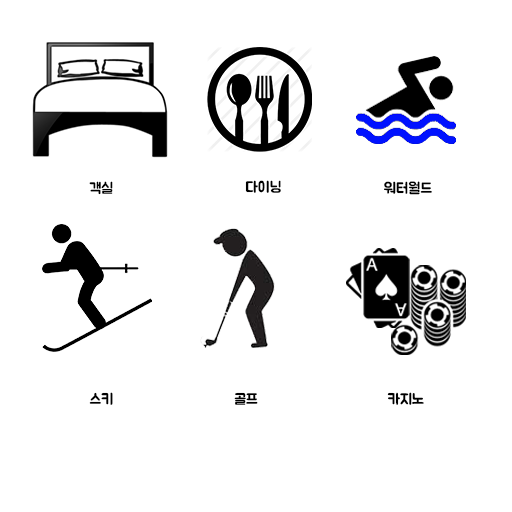
<style>
.page{position:relative;width:512px;height:512px;background:#ffffff}
.page>*{position:absolute;margin:0}
.t1{font:15px "BMJUA";color:#000000}
</style>
<div class="page">
<p class="t1" style="left:89px;top:181px;width:24px;height:14px">객실</p>
<p class="t1" style="left:245px;top:180px;width:36px;height:13px">다이닝</p>
<p class="t1" style="left:384px;top:181px;width:48px;height:14px">워터월드</p>
<p class="t1" style="left:89px;top:392px;width:24px;height:13px">스키</p>
<p class="t1" style="left:234px;top:392px;width:24px;height:13px">골프</p>
<p class="t1" style="left:387px;top:392px;width:37px;height:13px">카지노</p>
</div>
